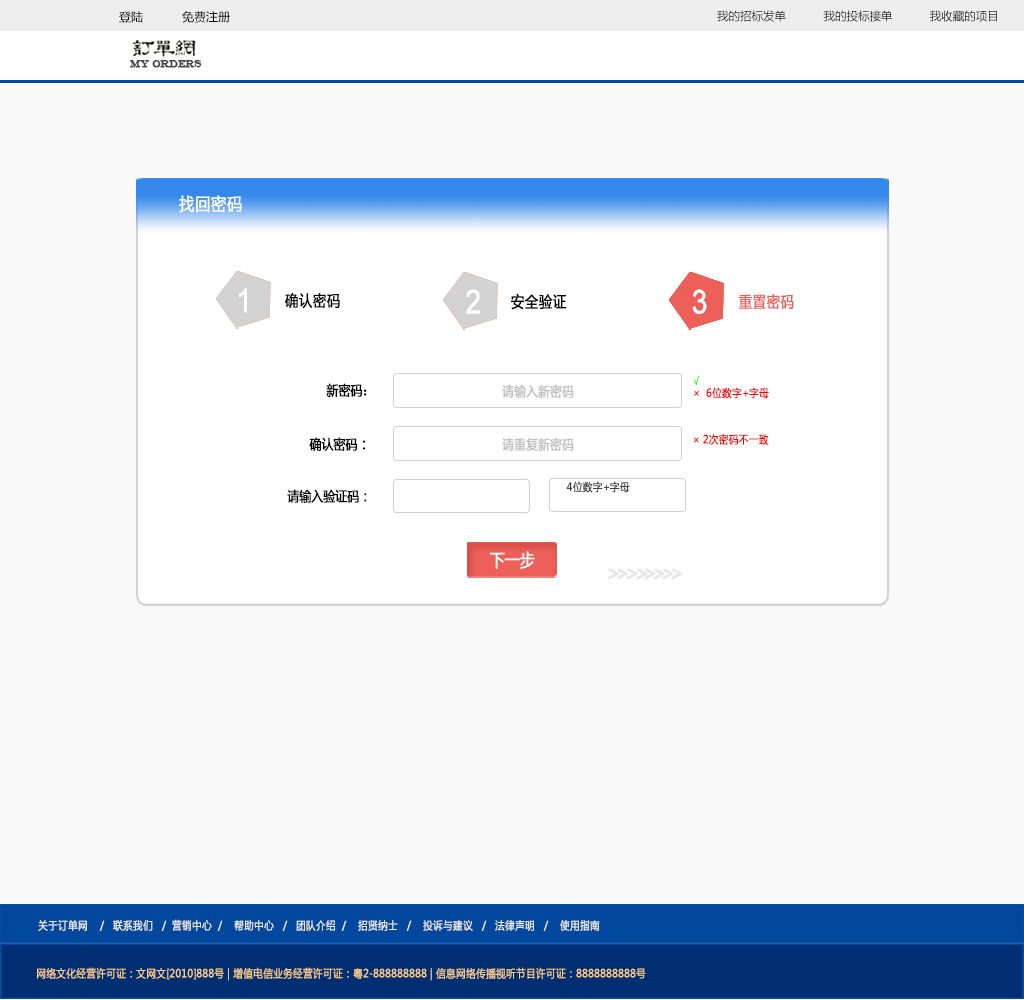
<style>
.page{position:relative;width:1024px;height:1000px;background:#f9f9f9}
.page>*{position:absolute;margin:0}
.t1{font:12px "MicrosoftYaHei";color:#000000}
.t2{font:11.5px "MicrosoftYaHei";color:#000000}
.t3{font:9.9px "EngraversMT";color:#434343;font-variant:small-caps;font-weight:bold;scale:0.86 1}
.t4{font:17.6px "MicrosoftYaHei";color:#ffffff;font-variant:small-caps;font-weight:bold;scale:0.86 1}
.t5{font:33px "ArialMT";color:#ffffff;font-variant:small-caps;font-weight:bold;scale:0.86 1}
.t6{font:15.4px "MicrosoftYaHei";color:#000000;font-variant:small-caps;font-weight:bold;scale:0.86 1}
.t7{font:15.4px "MicrosoftYaHei";color:#ed6059;font-variant:small-caps;font-weight:bold;scale:0.86 1}
.t8{font:11px "MicrosoftYaHei";color:#ff0000;font-variant:small-caps;font-weight:bold;scale:0.86 1}
.t9{font:11px "MicrosoftYaHei";color:#00ff00;font-variant:small-caps;font-weight:bold;scale:0.86 1}
.t10{font:13.8px "MicrosoftYaHei";color:#000000;font-variant:small-caps;font-weight:bold;scale:0.86 1}
.t11{font:15.4px "SimSun";color:#000000;font-variant:small-caps;font-weight:bold;scale:0.86 1}
.t12{font:13.2px "MicrosoftYaHei";color:#c0c0c0;font-variant:small-caps;font-weight:bold;scale:0.86 1}
.t13{font:11px "MicrosoftYaHei";color:#434343;font-variant:small-caps;font-weight:bold;scale:0.86 1}
.t14{font:17.4px "MicrosoftYaHei";color:#ffffff;font-variant:small-caps;font-weight:bold;scale:0.86 1}
.t15{font:11px "MicrosoftYaHei";color:#eeeeee;font-variant:small-caps;font-weight:bold;scale:0.86 1}
.t16{font:15.4px "STXihei";color:#eeeeee;font-variant:small-caps;font-weight:bold;scale:0.86 1}
.t17{font:11px "MicrosoftYaHei";color:#facd89;font-variant:small-caps;font-weight:bold;scale:0.87 1}
.t18{font:11px "MicrosoftYaHei";color:#eeeeee;font-variant:small-caps;font-weight:bold;scale:0.87 1}
</style>
<div class="page">
<p class="t1" style="left:119px;top:11px;width:111px;height:12px">登陆           免费注册</p>
<p class="t2" style="left:717px;top:10px;width:280px;height:12px">我的招标发单           我的投标接单           我收藏的项目</p>
<p class="t3" style="left:130px;top:60px;width:72px;height:8px">MY ORDERS</p>
<p class="t4" style="left:179px;top:195px;width:63px;height:18px">找回密码</p>
<p class="t5" style="left:239px;top:288px;width:8px;height:25px">1</p>
<p class="t6" style="left:285px;top:293px;width:55px;height:16px">确认密码</p>
<p class="t5" style="left:466px;top:289px;width:14px;height:25px">2</p>
<p class="t6" style="left:511px;top:293px;width:56px;height:17px">安全验证</p>
<p class="t5" style="left:692px;top:289px;width:15px;height:25px">3</p>
<p class="t7" style="left:738px;top:294px;width:56px;height:15px">重置密码</p>
<p class="t8" style="left:693px;top:375px;width:76px;height:24px"><span class="t9">√<br></span>×  6位数字+字母</p>
<p class="t10" style="left:326px;top:383px;width:41px;height:14px">新密码<span class="t11">：</span></p>
<p class="t12" style="left:502px;top:384px;width:72px;height:14px">请输入新密码</p>
<p class="t10" style="left:309px;top:437px;width:57px;height:15px">确认密码<span class="t6">：</span></p>
<p class="t12" style="left:502px;top:437px;width:72px;height:14px">请重复新密码</p>
<p class="t8" style="left:694px;top:434px;width:75px;height:11px">× 2次密码不一致</p>
<p class="t13" style="left:566px;top:481px;width:64px;height:12px">4位数字+字母</p>
<p class="t10" style="left:287px;top:489px;width:80px;height:14px">请输入验证码：</p>
<p class="t14" style="left:490px;top:551px;width:45px;height:18px">下一步</p>
<p class="t15" style="left:38px;top:919px;width:600px;height:12px"><span class="t16"><br><br></span>关于订单网    /   联系我们   /  营销中心  /    帮助中心   /   团队介绍  /    招贤纳士   /    你的建议    /    投诉   /   法律声明   /    使用指南</p>
<p class="t15" style="left:38px;top:919px;width:562px;height:12px"><span class="t16"><br><br></span>关于订单网    /   联系我们   /  营销中心  /    帮助中心   /   团队介绍  /    招贤纳士   /    投诉与建议   /   法律声明   /    使用指南</p>
<p class="t17" style="left:37px;top:967px;width:609px;height:14px"><span class="t18"> </span>网络文化经营许可证：文网文[2010]888号 | 增值电信业务经营许可证：粤2-888888888 | 信息网络传播视听节目许可证：8888888888号</p>
</div>
